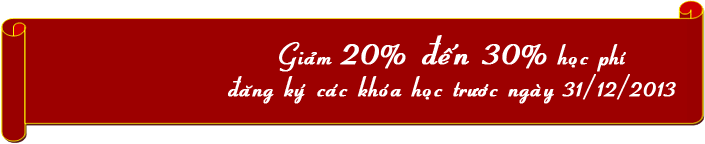
<style>
.page{position:relative;width:705px;height:144px;background:#9d0000}
.page>*{position:absolute;margin:0}
.t1{font:30.2px/25.6px "VNI-Coronet-Bold-Italic";letter-spacing:0.025em;color:#ffffff;font-weight:bold}
.t2{font:43.9px/25.6px "VNI-Coronet-Bold-Italic";letter-spacing:0.025em;color:#ffffff;font-weight:bold}
</style>
<div class="page">
<p class="t1" style="left:228px;top:35px;width:448px;height:69px;text-align:center">Giaûm <span class="t2">20% ñeán 30%</span> hoïc phí<br>ñaêng kyù caùc khoùa hoïc tröôùc ngaøy 31/12/2013</p>
</div>
